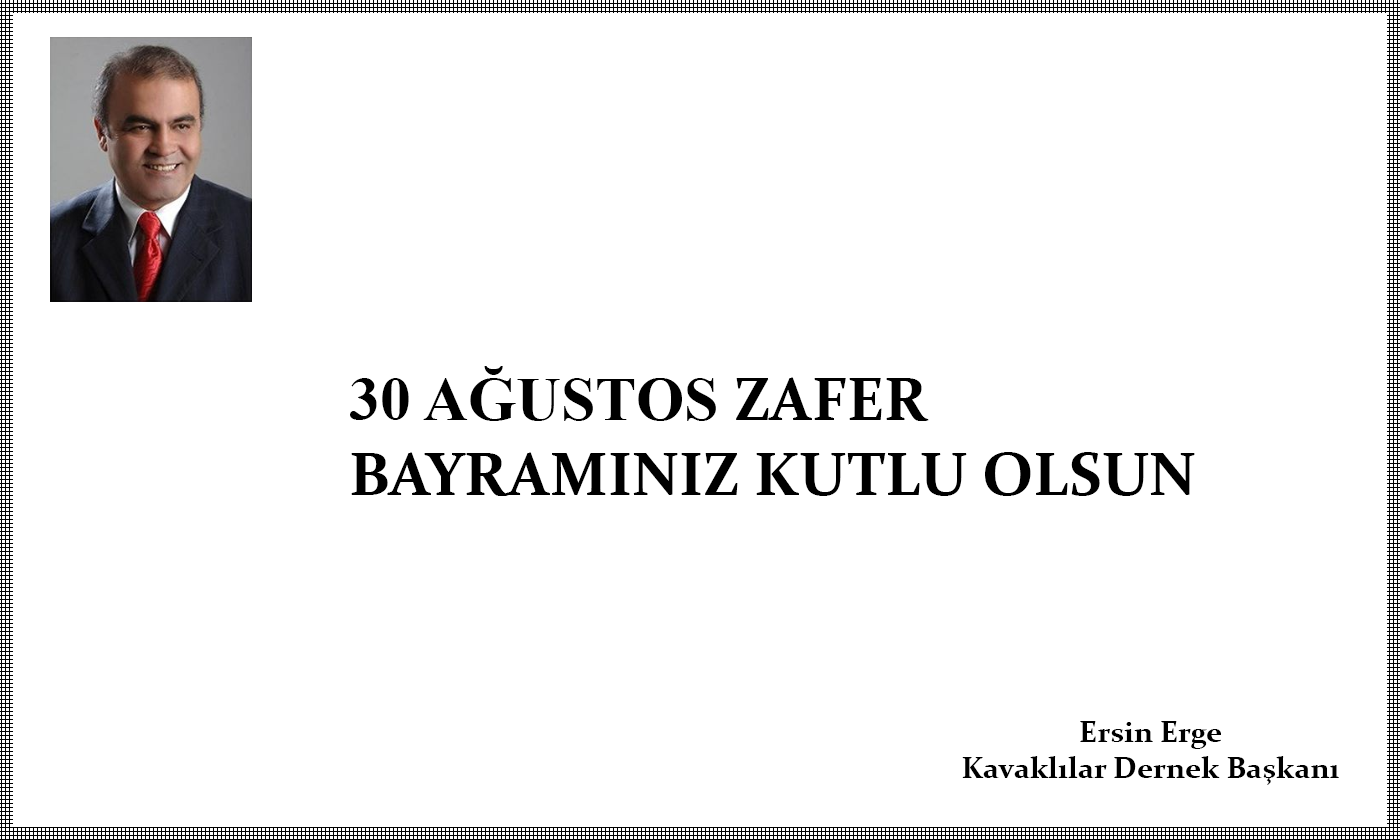
<style>
.page{position:relative;width:1400px;height:840px;background:#ffffff}
.page>*{position:absolute;margin:0}
.t1{font:62px "Constantia-Bold";color:#000000}
.t2{font:62px "TimesNewRomanPS-BoldMT";color:#000000}
.t3{font:30px "Constantia-Bold";color:#000000}
</style>
<div class="page">
<p class="t1" style="left:350px;top:366px;width:845px;height:130px"><span class="t2">30 AĞUSTOS </span>ZAFER<br>BAYRAMINIZ KUTLU OLSUN</p>
<p class="t3" style="left:962px;top:721px;width:377px;height:64px;text-align:center">Ersin Erge<br>Kavaklılar Dernek Başkanı</p>
</div>
